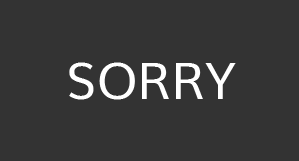
<style>
.page{position:relative;width:299px;height:161px;background:#333333}
.page>*{position:absolute;margin:0}
.t1{font:51px "Muli";color:#ffffff}
</style>
<div class="page">
<p class="t1" style="left:69px;top:62px;width:167px;height:38px">SORRY</p>
</div>
